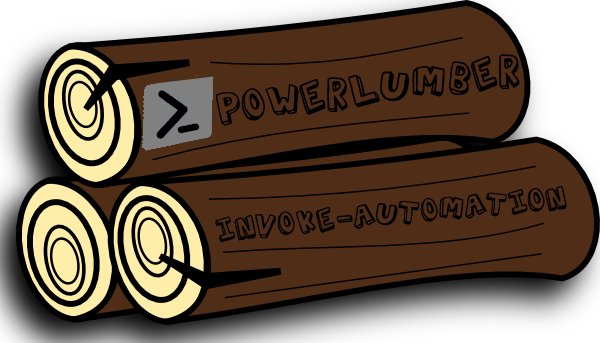
<style>
.page{position:relative;width:600px;height:343px;background:#502d16}
.page>*{position:absolute;margin:0}
.t1{font:43.7px "ActionJackson";color:#000000}
.t2{font:31.7px "ActionJackson";color:#000000}
</style>
<div class="page">
<p class="t1" style="left:216px;top:54px;width:304px;height:72px;rotate:-8deg">Powerlumber</p>
<p class="t2" style="left:215px;top:185px;width:352px;height:58px;rotate:-5deg">Invoke-Automation</p>
</div>
